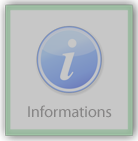
<style>
.page{position:relative;width:138px;height:141px;background:#c7c7c7}
.page>*{position:absolute;margin:0}
.t1{font:15.9px "MyriadPro-Regular";color:#868585}
</style>
<div class="page">
<p class="t1" style="left:28px;top:105px;width:84px;height:13px">Informations</p>
</div>
